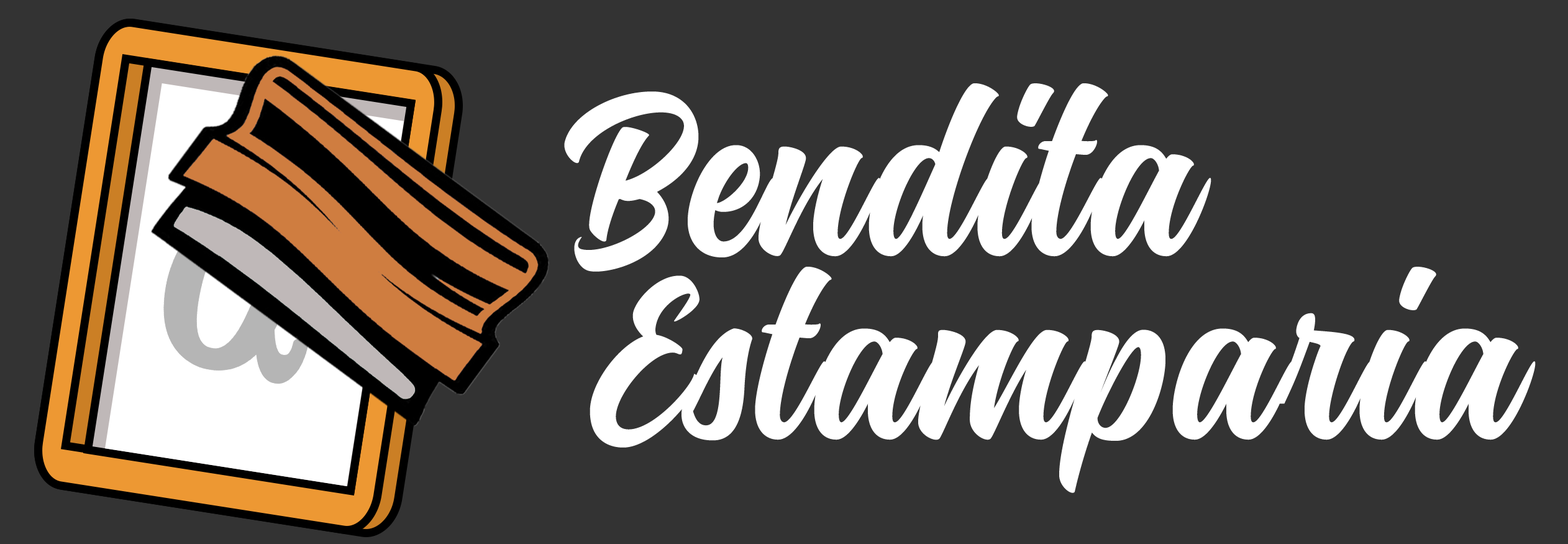
<style>
.page{position:relative;width:1568px;height:544px;background:#333333}
.page>*{position:absolute;margin:0}
.t1{font:229px/183.6px "Montana";letter-spacing:0.02em;color:#ffffff}
</style>
<div class="page">
<p class="t1" style="left:564px;top:83px;width:972px;height:410px;text-align:center">Bendita <br>  Estamparia</p>
</div>
